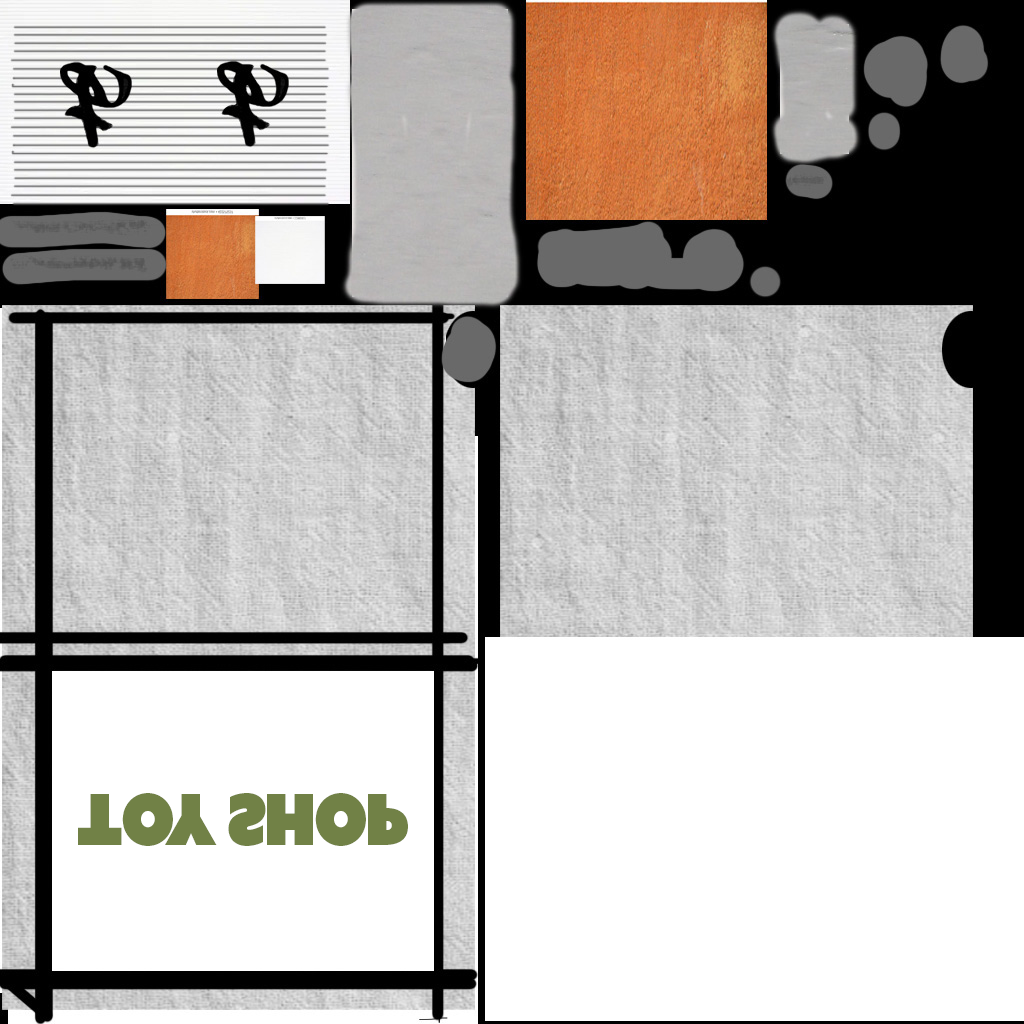
<style>
.page{position:relative;width:1024px;height:1024px;background:#ffffff}
.page>*{position:absolute;margin:0}
.t1{font:70.3px "AzoSansUber-Regular";letter-spacing:-0.04em;color:#718146;scale:0.89 1}
</style>
<div class="page">
<p class="t1" style="left:78px;top:793px;width:330px;height:53px">Toy Shop</p>
</div>
